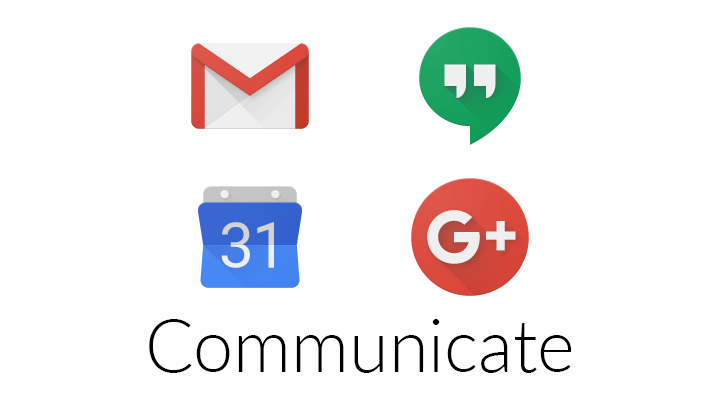
<style>
.page{position:relative;width:720px;height:400px;background:#ffffff}
.page>*{position:absolute;margin:0}
.t1{font:72px "Lato-Light";color:#000000}
</style>
<div class="page">
<p class="t1" style="left:149px;top:319px;width:423px;height:54px">Communicate</p>
</div>
